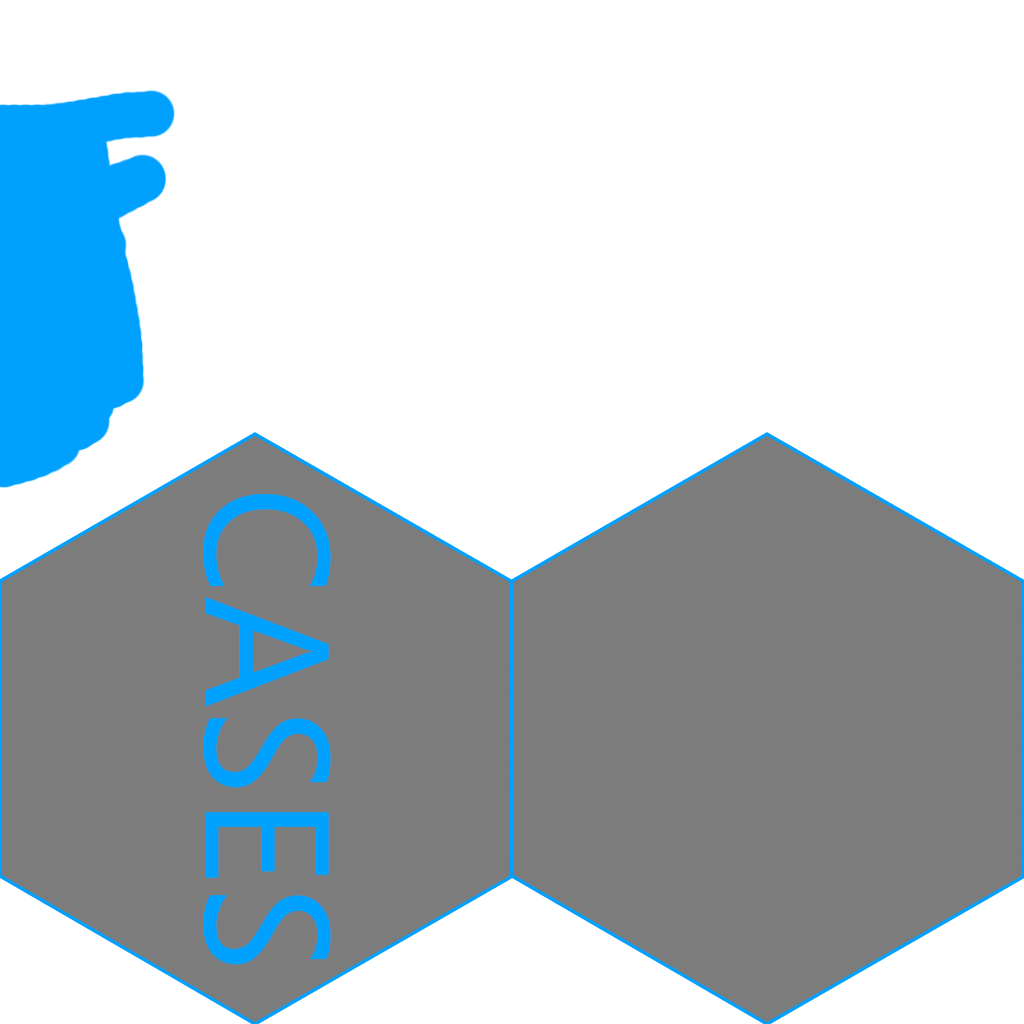
<style>
.page{position:relative;width:1024px;height:1024px;background:#ffffff}
.page>*{position:absolute;margin:0}
.t1{font:176px "SegoeUI-Regular";color:#00a0ff}
.t2{font:176px "SegoeUI-Regular";color:#ffffff}
</style>
<div class="page">
<p class="t1" style="left:203px;top:494px;width:128px;height:471px;rotate:90deg"><span class="t2"><br><br><br><br><br><br><br><br><br><br><br><br><br><br><br><br></span>CASES</p>
</div>
